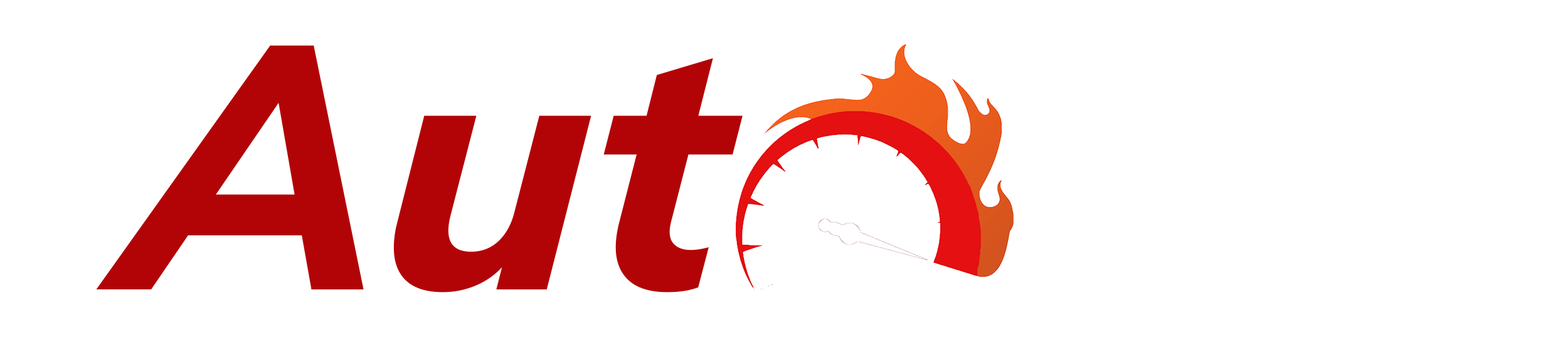
<style>
.page{position:relative;width:1568px;height:344px;background:#ffffff}
.page>*{position:absolute;margin:0}
.t1{font:342.1px "Muli-ExtraBoldItalic";color:#b20406;font-style:italic}
</style>
<div class="page">
<p class="t1" style="left:96px;top:45px;width:647px;height:247px">Aut</p>
</div>
